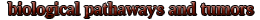
<style>
.page{position:relative;width:260px;height:20px;background:#ffffff}
.page>*{position:absolute;margin:0}
.t1{font:16.8px "LucidaBright-Demi";scale:0.88 1}
</style>
<div class="page">
<p class="t1" style="left:7px;top:2px;width:247px;height:16px">biological pathaways and tumors</p>
</div>
